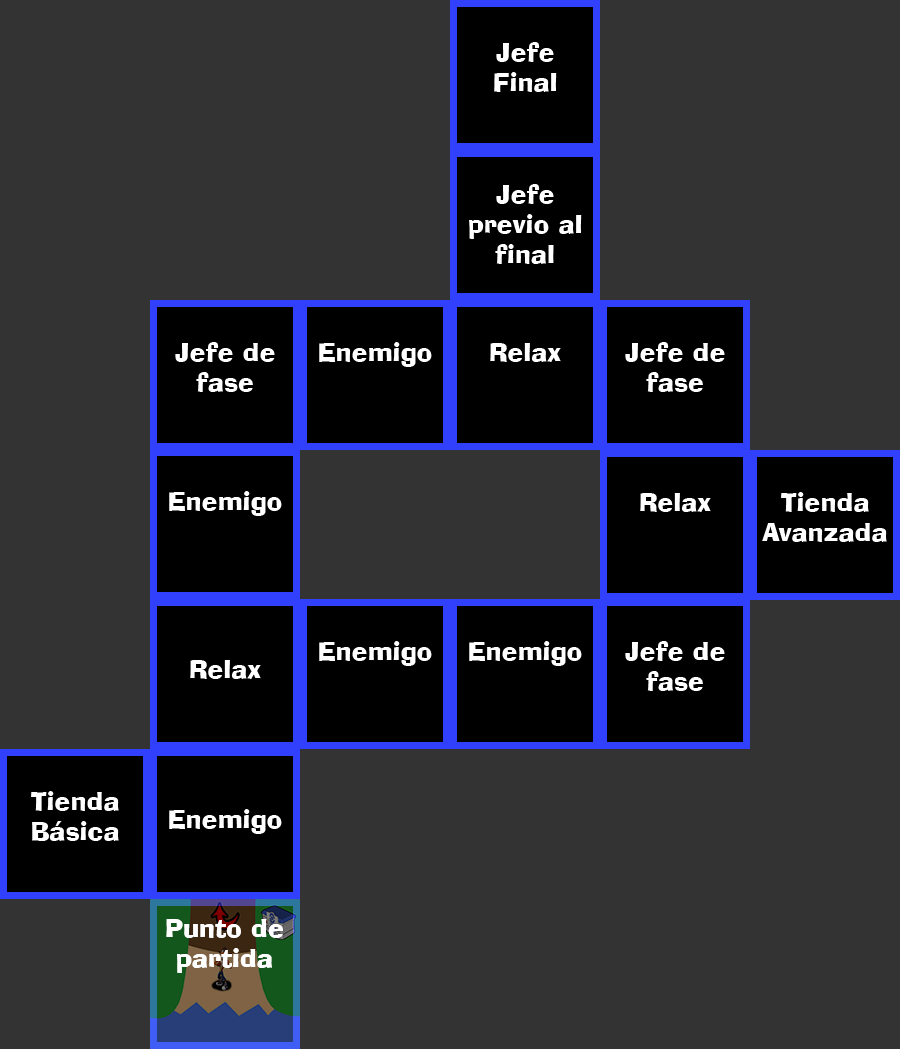
<style>
.page{position:relative;width:900px;height:1049px;background:#333333}
.page>*{position:absolute;margin:0}
.t1{font:25px "AdLibBT-Regular";color:#ffffff}
</style>
<div class="page">
<p class="t1" style="left:494px;top:42px;width:63px;height:50px;text-align:center">Jefe<br>Final</p>
<p class="t1" style="left:469px;top:184px;width:113px;height:80px;text-align:center">Jefe previo al final</p>
<p class="t1" style="left:175px;top:342px;width:100px;height:50px;text-align:center">Jefe de fase</p>
<p class="t1" style="left:319px;top:342px;width:113px;height:25px">Enemigo</p>
<p class="t1" style="left:625px;top:342px;width:100px;height:50px;text-align:center">Jefe de fase</p>
<p class="t1" style="left:490px;top:343px;width:71px;height:19px">Relax</p>
<p class="t1" style="left:169px;top:491px;width:113px;height:25px">Enemigo</p>
<p class="t1" style="left:640px;top:493px;width:71px;height:19px">Relax</p>
<p class="t1" style="left:762px;top:492px;width:125px;height:50px;text-align:center">Tienda<br>Avanzada</p>
<p class="t1" style="left:319px;top:641px;width:113px;height:25px">Enemigo</p>
<p class="t1" style="left:469px;top:641px;width:113px;height:25px">Enemigo</p>
<p class="t1" style="left:625px;top:641px;width:100px;height:50px;text-align:center">Jefe de fase</p>
<p class="t1" style="left:190px;top:660px;width:71px;height:19px">Relax</p>
<p class="t1" style="left:31px;top:791px;width:88px;height:50px;text-align:center">Tienda<br>Básica</p>
<p class="t1" style="left:169px;top:809px;width:113px;height:25px">Enemigo</p>
<p class="t1" style="left:166px;top:919px;width:117px;height:54px;text-align:center">Punto de partida</p>
</div>
